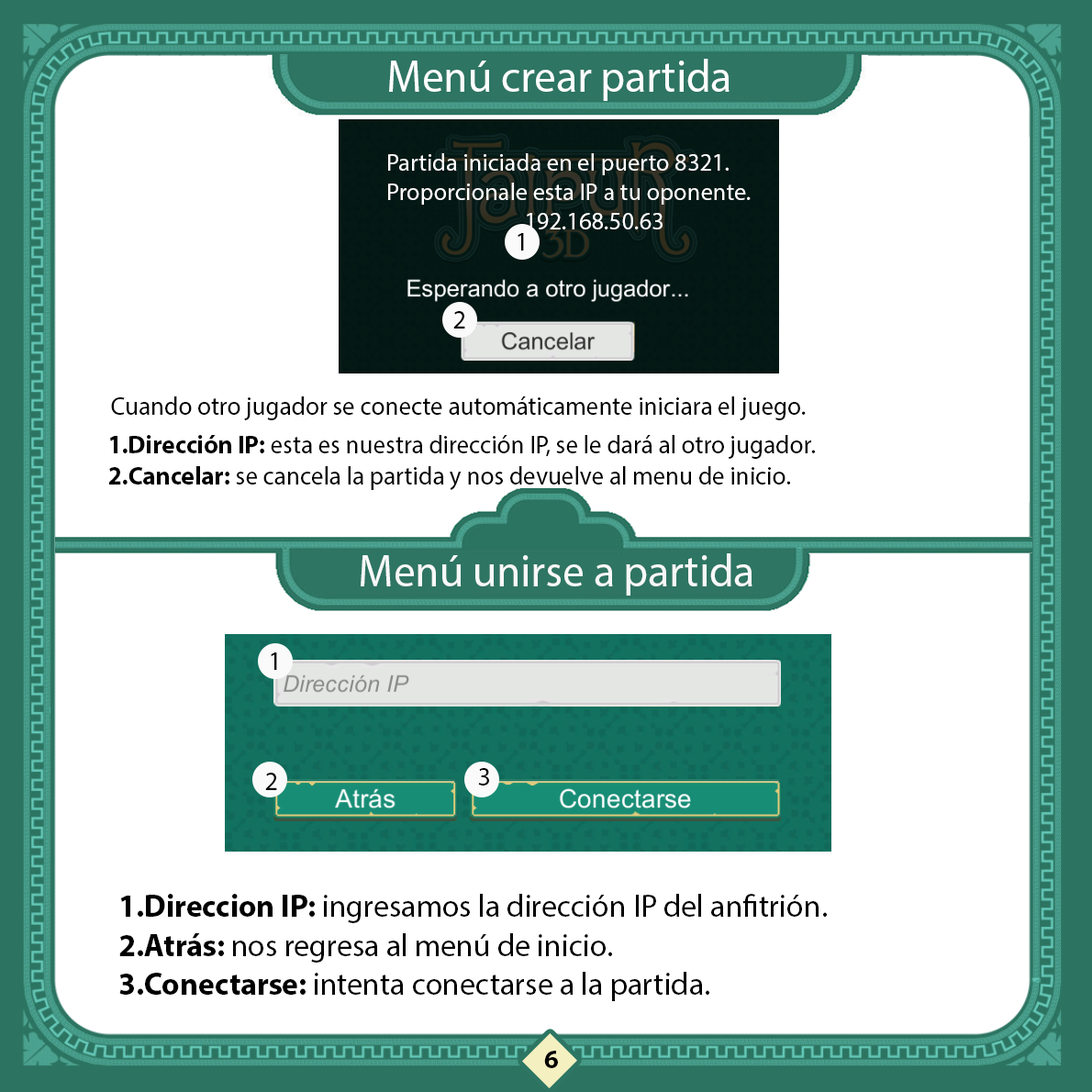
<style>
.page{position:relative;width:1092px;height:1092px;background:#ffffff}
.page>*{position:absolute;margin:0}
.t1{font:45.3px "MyriadPro-Regular";color:#ffffff;scale:0.96 1}
.t2{font:24.3px "MyriadPro-Regular";color:#ffffff}
.t3{font:26.8px "MyriadPro-Regular";color:#000000;scale:0.96 1}
.t4{font:25.9px "MyriadPro-Regular";color:#000000;scale:0.96 1}
.t5{font:25.9px "MyriadPro-Bold";color:#000000;scale:0.96 1}
.t6{font:45.3px "MyriadPro-Regular";color:#f8f8f8;scale:0.96 1}
.t7{font:32.4px "MyriadPro-Regular";color:#000000;scale:0.96 1}
.t8{font:32.4px "MyriadPro-Bold";color:#000000;scale:0.96 1}
.t9{font:25.9px "MyriadHebrew-Bold";color:#000000}
</style>
<div class="page">
<p class="t1" style="left:389px;top:59px;width:341px;height:42px">Menú crear partida</p>
<p class="t2" style="left:388px;top:153px;width:363px;height:76px;text-align:right">Partida iniciada en el puerto 8321.<br>Proporcionale esta IP a tu oponente.<br>192.168.50.63</p>
<p class="t3" style="left:518px;top:233px;width:6px;height:18px">1</p>
<p class="t3" style="left:453px;top:311px;width:12px;height:18px">2</p>
<p class="t4" style="left:111px;top:396px;width:695px;height:24px">Cuando otro jugador se conecte automáticamente iniciara el juego.</p>
<p class="t4" style="left:109px;top:435px;width:706px;height:55px;text-align:right"><span class="t5">1.Dirección IP: </span>esta es nuestra dirección IP, se le dará al otro jugador.<br><span class="t5">2.Cancelar:</span> se cancela la partida y nos devuelve al menu de inicio.</p>
<p class="t6" style="left:361px;top:553px;width:391px;height:43px">Menú unirse a partida</p>
<p class="t3" style="left:271px;top:652px;width:6px;height:18px">1</p>
<p class="t3" style="left:265px;top:773px;width:12px;height:17px">2</p>
<p class="t3" style="left:478px;top:768px;width:11px;height:17px">3</p>
<p class="t7" style="left:119px;top:894px;width:708px;height:107px;text-align:right"><span class="t8">1.Direccion IP: </span>ingresamos la dirección IP del anfitrión.<br><span class="t8">2.Atrás: </span>nos regresa al menú de inicio.<br><span class="t8">3.Conectarse: </span>intenta conectarse a la partida.</p>
<p class="t9" style="left:544px;top:1051px;width:14px;height:17px">6</p>
</div>
